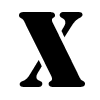
<style>
.page{position:relative;width:100px;height:100px;background:#ffffff}
.page>*{position:absolute;margin:0}
.t1{font:100px "StencilStd";color:#000000}
</style>
<div class="page">
<p class="t1" style="left:19px;top:12px;width:66px;height:75px">X</p>
</div>
